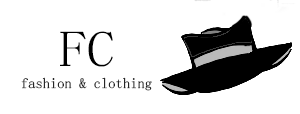
<style>
.page{position:relative;width:300px;height:114px;background:#ffffff}
.page>*{position:absolute;margin:0}
.t1{font:51.2px "FangSong";color:#000000;scale:1.09 1}
.t2{font:14.6px "FangSong";color:#000000}
</style>
<div class="page">
<p class="t1" style="left:60px;top:31px;width:53px;height:36px">FC</p>
<p class="t2" style="left:21px;top:77px;width:131px;height:14px">fashion &amp; clothing</p>
</div>
